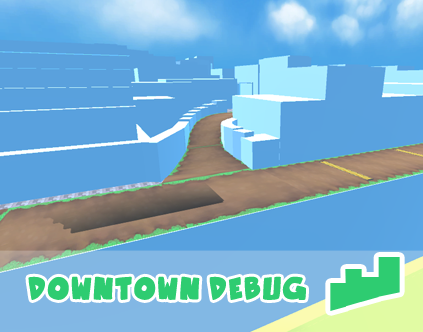
<style>
.page{position:relative;width:423px;height:332px}
.page>*{position:absolute;margin:0}
.t1{font:32.7px "OtakuRant-Bold";color:#2ecc71}
</style>
<div class="page">
<p class="t1" style="left:28px;top:276px;width:278px;height:24px">Downtown Debug</p>
</div>
